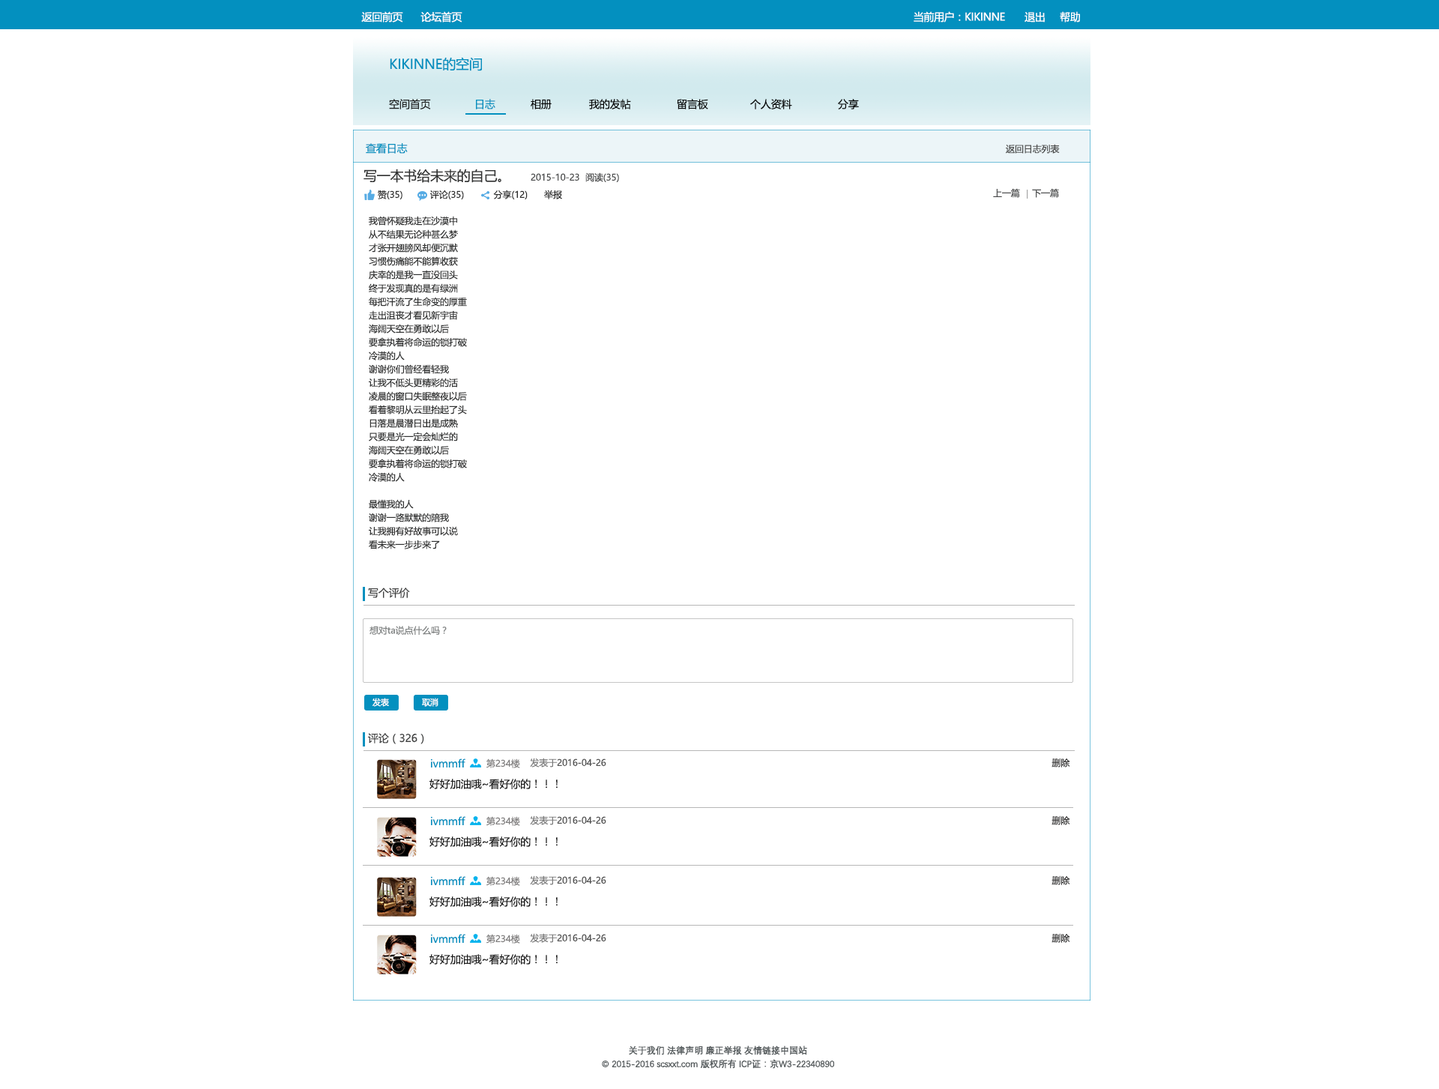
<style>
.page{position:relative;width:1439px;height:1089px;background:#ffffff}
.page>*{position:absolute;margin:0}
.t1{font:10.5px "MicrosoftYaHei";letter-spacing:-0.025em;color:#ffffff}
.t2{font:13.5px "MicrosoftYaHei";letter-spacing:-0.01em;color:#0390bf}
.t3{font:10.5px "MicrosoftYaHei";letter-spacing:-0.01em;color:#1f2020}
.t4{font:10.5px "MicrosoftYaHei";letter-spacing:-0.01em;color:#0390bf}
.t5{font:10.5px "MicrosoftYaHei";letter-spacing:-0.01em;color:#040404}
.t6{font:9px "MicrosoftYaHei";letter-spacing:-0.01em;color:#4a4b4b}
.t7{font:13.5px "MicrosoftYaHei";letter-spacing:-0.01em;color:#313232}
.t8{font:9px "MicrosoftYaHei";letter-spacing:-0.01em;color:#4b4c4d}
.t9{font:8.9px "MicrosoftYaHei";letter-spacing:-0.01em;color:#2b2b2b}
.t10{font:9px "MicrosoftYaHei";letter-spacing:-0.01em;color:#252525}
.t11{font:8.9px "MicrosoftYaHei";letter-spacing:-0.01em;color:#4b4c4d}
.t12{font:9px/13.5px "MicrosoftYaHei";letter-spacing:-0.01em;color:#313232}
.t13{font:10.5px "MicrosoftYaHei";letter-spacing:-0.01em;color:#404141}
.t14{font:9px "MicrosoftYaHei";letter-spacing:-0.01em;color:#818484}
.t15{font:8.3px "MicrosoftYaHei";letter-spacing:-0.01em;color:#ffffff}
.t16{font:9px "MicrosoftYaHei";letter-spacing:-0.01em;color:#7f7d7d}
.t17{font:9px "MicrosoftYaHei";letter-spacing:-0.01em;color:#535353}
.t18{font:9px "MicrosoftYaHei";letter-spacing:-0.01em;color:#7a7a7a}
.t19{font:9px "MicrosoftYaHei";letter-spacing:-0.01em;color:#2e2d2d}
.t20{font:10.5px "MicrosoftYaHei";letter-spacing:-0.01em;color:#1a1a1a}
.t21{font:9px/13.5px "DengXian-Regular";letter-spacing:-0.025em;color:#545a5c;font-weight:bold}
</style>
<div class="page">
<p class="t1" style="left:361px;top:11px;width:42px;height:11px">返回前页</p>
<p class="t1" style="left:420px;top:11px;width:42px;height:11px">论坛首页</p>
<p class="t1" style="left:914px;top:11px;width:91px;height:11px">当前用户：KIKINNE</p>
<p class="t1" style="left:1024px;top:12px;width:21px;height:10px">退出</p>
<p class="t1" style="left:1060px;top:11px;width:20px;height:11px">帮助</p>
<p class="t2" style="left:390px;top:57px;width:92px;height:14px">KIKINNE的空间</p>
<p class="t3" style="left:389px;top:99px;width:42px;height:10px">空间首页</p>
<p class="t4" style="left:476px;top:99px;width:19px;height:10px">日志</p>
<p class="t5" style="left:531px;top:99px;width:21px;height:10px">相册</p>
<p class="t5" style="left:589px;top:99px;width:42px;height:10px">我的发帖</p>
<p class="t5" style="left:677px;top:99px;width:31px;height:10px">留言板</p>
<p class="t5" style="left:750px;top:99px;width:42px;height:10px">个人资料</p>
<p class="t5" style="left:838px;top:99px;width:21px;height:10px">分享</p>
<p class="t4" style="left:366px;top:143px;width:42px;height:11px">查看日志</p>
<p class="t6" style="left:1006px;top:144px;width:54px;height:10px">返回日志列表</p>
<p class="t7" style="left:363px;top:169px;width:138px;height:14px">写一本书给未来的自己。</p>
<p class="t8" style="left:531px;top:173px;width:48px;height:8px">2015-10-23</p>
<p class="t8" style="left:585px;top:172px;width:34px;height:10px">阅读(35)</p>
<p class="t9" style="left:378px;top:190px;width:24px;height:9px">赞(35)</p>
<p class="t9" style="left:430px;top:190px;width:34px;height:9px">评论(35)</p>
<p class="t9" style="left:493px;top:190px;width:35px;height:9px">分享(12)</p>
<p class="t10" style="left:544px;top:190px;width:18px;height:9px">举报</p>
<p class="t11" style="left:993px;top:188px;width:27px;height:10px">上一篇</p>
<p class="t11" style="left:1032px;top:188px;width:27px;height:10px">下一篇</p>
<p class="t12" style="left:369px;top:216px;width:98px;height:333px">我曾怀疑我走在沙漠中<br>从不结果无论种甚么梦<br>才张开翅膀风却便沉默<br>习惯伤痛能不能算收获<br>庆幸的是我一直没回头<br>终于发现真的是有绿洲<br>每把汗流了生命变的厚重<br>走出沮丧才看见新宇宙<br>海阔天空在勇敢以后<br>要拿执着将命运的锁打破<br>冷漠的人<br>谢谢你们曾经看轻我<br>让我不低头更精彩的活<br>凌晨的窗口失眠整夜以后<br>看着黎明从云里抬起了头<br>日落是晨潜日出是成熟<br>只要是光一定会灿烂的<br>海阔天空在勇敢以后<br>要拿执着将命运的锁打破<br>冷漠的人<br><br>最懂我的人<br>谢谢一路默默的陪我<br>让我拥有好故事可以说<br>看未来一步步来了</p>
<p class="t13" style="left:368px;top:588px;width:42px;height:10px">写个评价</p>
<p class="t14" style="left:369px;top:626px;width:78px;height:9px">想对ta说点什么吗？</p>
<p class="t15" style="left:372px;top:698px;width:17px;height:9px">发表</p>
<p class="t15" style="left:422px;top:698px;width:16px;height:9px">取消</p>
<p class="t13" style="left:368px;top:733px;width:56px;height:11px">评论（326）</p>
<p class="t4" style="left:431px;top:758px;width:34px;height:9px">ivmmff</p>
<p class="t16" style="left:486px;top:758px;width:34px;height:10px">第234楼</p>
<p class="t17" style="left:530px;top:758px;width:76px;height:9px"><span class="t18"> 发表于</span>2016-04-26</p>
<p class="t19" style="left:1051px;top:758px;width:19px;height:9px">删除</p>
<p class="t20" style="left:429px;top:779px;width:129px;height:10px">好好加油哦~看好你的！！！</p>
<p class="t4" style="left:431px;top:816px;width:34px;height:9px">ivmmff</p>
<p class="t16" style="left:486px;top:816px;width:34px;height:10px">第234楼</p>
<p class="t17" style="left:530px;top:815px;width:76px;height:10px"><span class="t18"> 发表于</span>2016-04-26</p>
<p class="t19" style="left:1051px;top:815px;width:19px;height:10px">删除</p>
<p class="t20" style="left:429px;top:836px;width:129px;height:11px">好好加油哦~看好你的！！！</p>
<p class="t4" style="left:431px;top:876px;width:34px;height:9px">ivmmff</p>
<p class="t16" style="left:486px;top:876px;width:34px;height:10px">第234楼</p>
<p class="t17" style="left:530px;top:875px;width:76px;height:10px"><span class="t18"> 发表于</span>2016-04-26</p>
<p class="t19" style="left:1051px;top:875px;width:19px;height:10px">删除</p>
<p class="t20" style="left:429px;top:896px;width:129px;height:11px">好好加油哦~看好你的！！！</p>
<p class="t4" style="left:431px;top:934px;width:34px;height:9px">ivmmff</p>
<p class="t16" style="left:486px;top:934px;width:34px;height:9px">第234楼</p>
<p class="t17" style="left:530px;top:933px;width:76px;height:10px"><span class="t18"> 发表于</span>2016-04-26</p>
<p class="t19" style="left:1051px;top:933px;width:19px;height:10px">删除</p>
<p class="t20" style="left:429px;top:954px;width:129px;height:10px">好好加油哦~看好你的！！！</p>
<p class="t21" style="left:602px;top:1045px;width:232px;height:24px;text-align:center">关于我们 法律声明 廉正举报 友情链接中国站<br>© 2015-2016 scsxxt.com 版权所有 ICP证：京W3-22340890</p>
</div>
